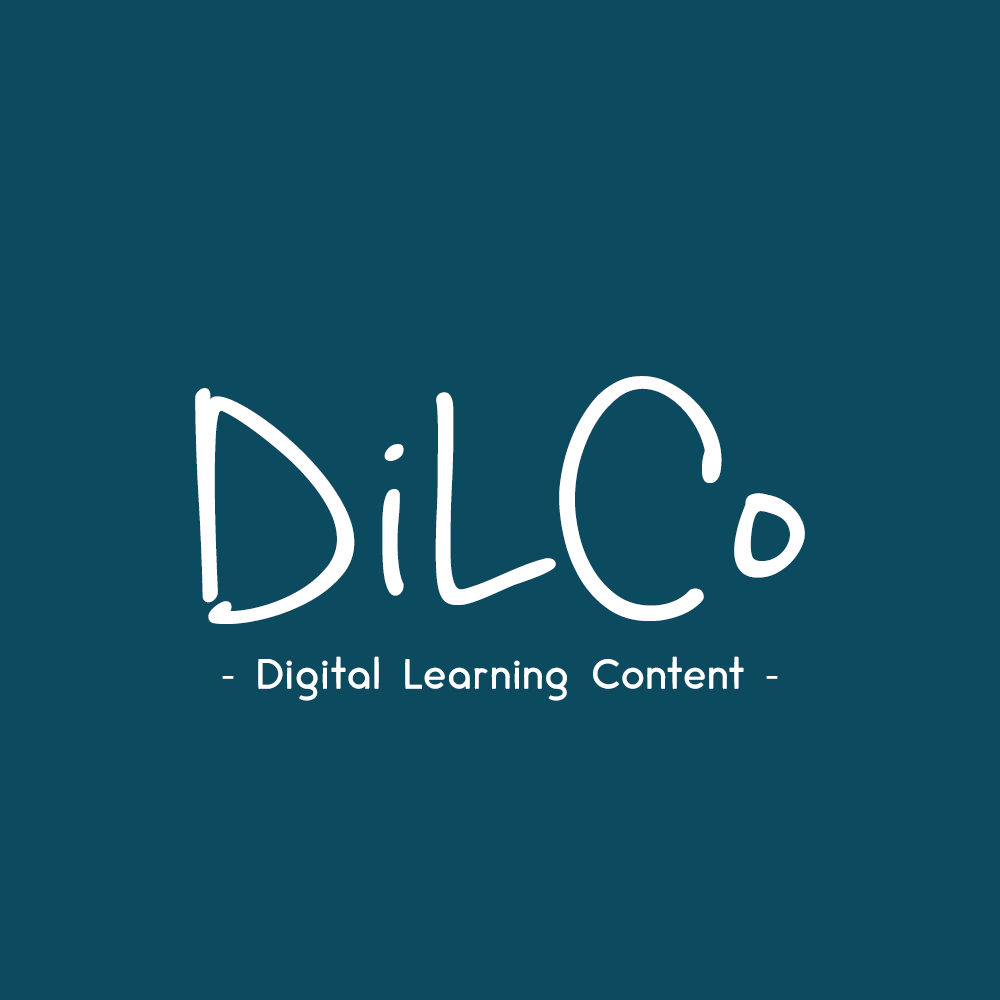
<style>
.page{position:relative;width:1000px;height:1000px;background:#0c4a60}
.page>*{position:absolute;margin:0}
.t1{font:378.2px "CashewAppleAle";color:#ffffff}
.t2{font:42.3px "cream-DEMO";color:#ffffff}
.t3{font:42.3px "MyriadPro-Regular";color:#ffffff}
</style>
<div class="page">
<p class="t1" style="left:195px;top:376px;width:610px;height:248px">DiLCo</p>
<p class="t2" style="left:222px;top:656px;width:556px;height:45px"><span class="t3">-</span> Digital Learning Content <span class="t3">-</span></p>
</div>
